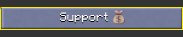
<style>
.page{position:relative;width:183px;height:37px;background:#333333}
.page>*{position:absolute;margin:0}
.t1{font:9.8px "Minecraft";color:#ffffff}
</style>
<div class="page">
<p class="t1" style="left:60px;top:12px;width:48px;height:11px">Support</p>
</div>
